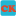
<style>
.page{position:relative;width:16px;height:16px;background:#20b7d4}
.page>*{position:absolute;margin:0}
.t1{font:10px "CooperBlack";color:#df482b}
</style>
<div class="page">
<p class="t1" style="left:1px;top:5px;width:16px;height:7px">CK</p>
</div>
